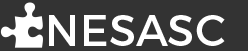
<style>
.page{position:relative;width:248px;height:51px;background:#333333}
.page>*{position:absolute;margin:0}
.t1{font:43px "Montserrat-Regular";color:#ffffff}
</style>
<div class="page">
<p class="t1" style="left:49px;top:15px;width:176px;height:31px">NESASC</p>
</div>
